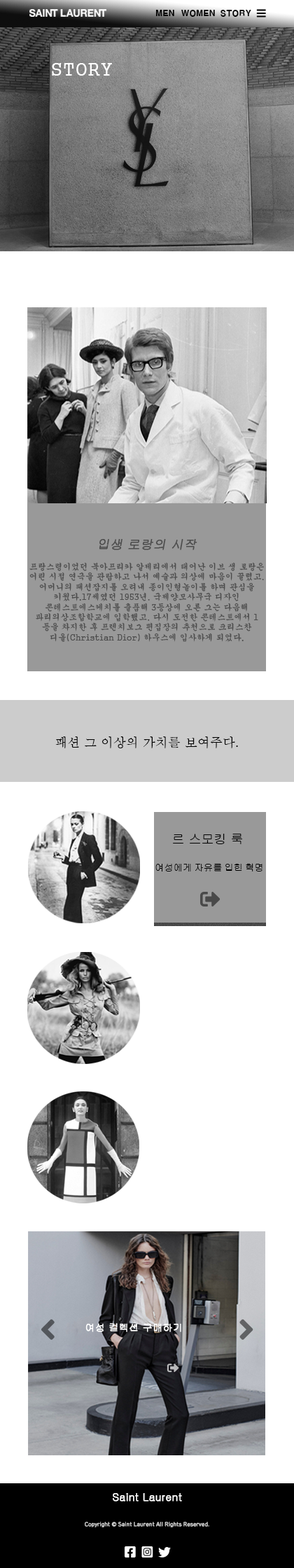
<style>
.page{position:relative;width:294px;height:1568px;background:#ffffff}
.page>*{position:absolute;margin:0}
.t1{font:8.1px "H2gtrE";color:#000000}
.t2{font:17.5px "H2gsrB";color:#ffffff}
.t3{font:12.6px "Gulim";color:#4c4c4c;font-weight:bold;font-style:italic}
.t4{font:8.4px "Gungsuh";color:#4c4c4c}
.t5{font:12.6px "Batang";color:#000000}
.t6{font:12.6px "Gulim";color:#000000}
.t7{font:9.3px "Gulim";color:#000000}
.t8{font:9.5px "Gulim";color:#ffffff;font-weight:bold;scale:1.03 1}
.t9{font:10.8px "Gulim";color:#ffffff;font-weight:bold}
.t10{font:5.4px "HCRDotum";color:#d4d4d4;font-weight:bold}
</style>
<div class="page">
<p class="t1" style="left:155px;top:9px;width:19px;height:8px">MEN</p>
<p class="t1" style="left:181px;top:9px;width:34px;height:8px">WOMEN</p>
<p class="t1" style="left:220px;top:9px;width:31px;height:8px">STORY</p>
<p class="t2" style="left:52px;top:63px;width:60px;height:13px">STORY</p>
<p class="t3" style="left:99px;top:539px;width:98px;height:11px">입생 로랑의 시작</p>
<p class="t4" style="left:29px;top:562px;width:235px;height:80px;text-align:center">프랑스령이었던 북아프리카 알제리에서 태어난 이브 생 로랑은 어린 시절 연극을 관람하고 나서 예술과 의상에 마음이 끌렸고, 어머니의 패션잡지를 오려내 종이인형놀이를 하며 관심을 키웠다.17세였던 1953년, 국제양모사무국 디자인 콘테스트에스케치를 출품해 3등상에 오른 그는 다음해 파리의상조합학교에 입학했고, 다시 도전한 콘테스트에서 1등을 차지한 후 프렌치보그 편집장의 추천으로 크리스찬 디올(Christian Dior) 하우스에 입사하게 되었다.</p>
<p class="t5" style="left:55px;top:736px;width:183px;height:12px">패션 그 이상의 가치를 보여주다.</p>
<p class="t6" style="left:173px;top:834px;width:69px;height:10px">르 스모킹 룩</p>
<p class="t7" style="left:155px;top:863px;width:107px;height:9px">여성에게 자유를 입힌 혁명</p>
<p class="t8" style="left:85px;top:1323px;width:96px;height:9px">여성 컬렉션 구매하기</p>
<p class="t9" style="left:113px;top:1493px;width:69px;height:9px">Saint Laurent</p>
<p class="t10" style="left:85px;top:1522px;width:124px;height:5px">Copyright © Saint Laurent All Rights Reserved.</p>
</div>
